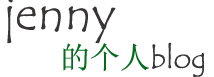
<style>
.page{position:relative;width:214px;height:77px;background:#ffffff}
.page>*{position:absolute;margin:0}
.t1{font:48px "TempusSansITC";color:#383535}
.t2{font:30px "TempusSansITC";color:#383535}
.t3{font:30px "SimSun";color:#056b1d}
</style>
<div class="page">
<p class="t1" style="left:7px;top:0px;width:109px;height:44px">jenny</p>
<p class="t2" style="left:63px;top:42px;width:142px;height:35px"><span class="t3">的个人</span>blog</p>
</div>
